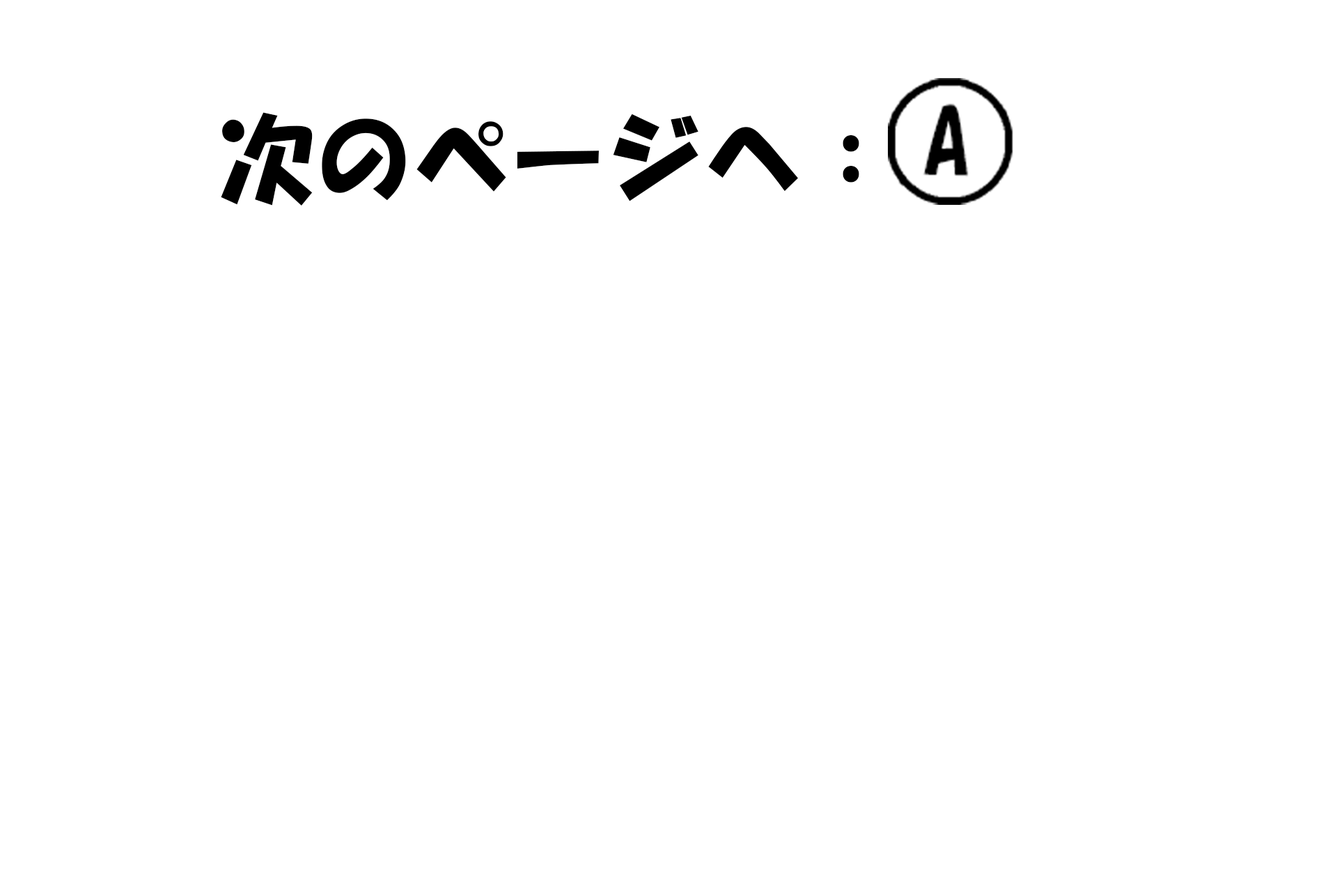
<style>
.page{position:relative;width:1337px;height:892px;background:#ffffff}
.page>*{position:absolute;margin:0}
.t1{font:97.5px "HGSoeiKakupoptai";color:#000000}
</style>
<div class="page">
<p class="t1" style="left:221px;top:112px;width:639px;height:93px">次のページへ：</p>
</div>
